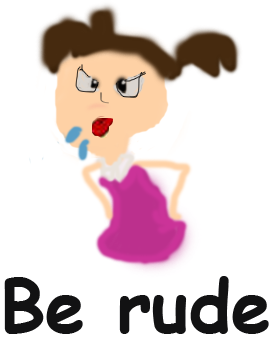
<style>
.page{position:relative;width:271px;height:354px;background:#ffffff}
.page>*{position:absolute;margin:0}
.t1{font:72px "ComicSansMS-Bold";color:#121213}
</style>
<div class="page">
<p class="t1" style="left:4px;top:276px;width:265px;height:58px">Be rude</p>
</div>
